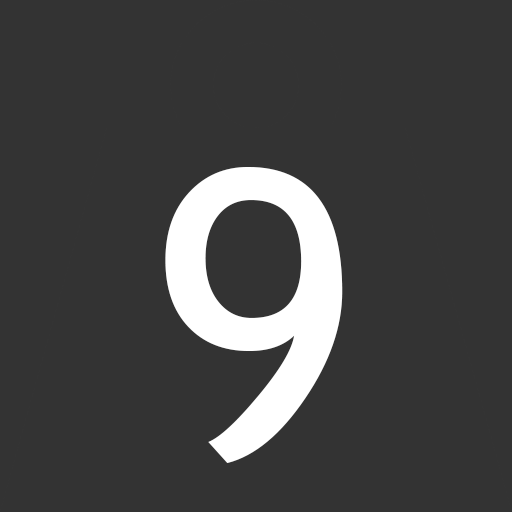
<style>
.page{position:relative;width:512px;height:512px;background:#333333}
.page>*{position:absolute;margin:0}
.t1{font:400px "TrebuchetMS";color:#ffffff}
</style>
<div class="page">
<p class="t1" style="left:165px;top:167px;width:178px;height:296px">9</p>
</div>
